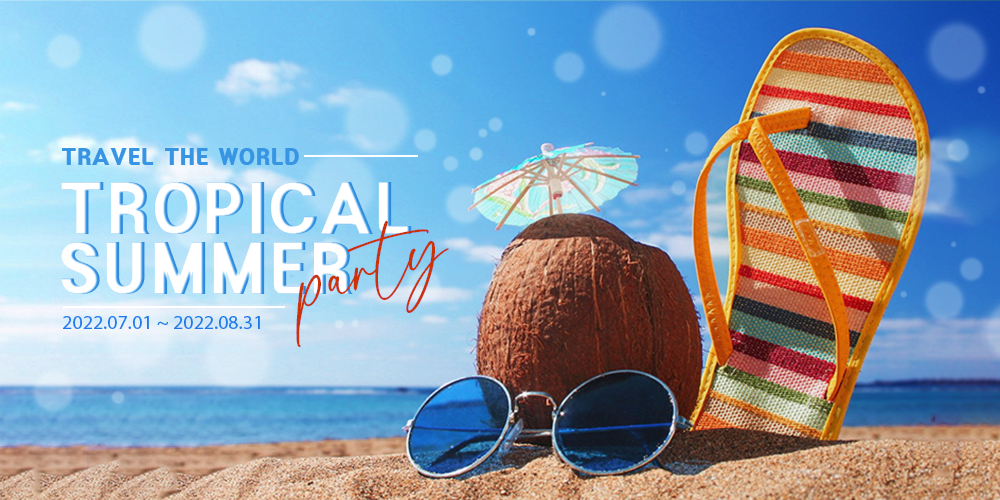
<style>
.page{position:relative;width:1000px;height:500px}
.page>*{position:absolute;margin:0}
.t1{font:20px "HeadlineR-HM";color:#3895e3}
.t2{font:60.1px/60.1px "HeadlineR-HM";color:#ffffff}
.t3{font:90px "Hamilton";color:#ca3305}
.t4{font:20px "MyriadPro-Regular";color:#1e7aeb}
</style>
<div class="page">
<p class="t1" style="left:62px;top:148px;width:237px;height:17px">TRAVEL THE WORLD</p>
<p class="t2" style="left:61px;top:182px;width:351px;height:112px">TROPICAL<br>SUMMER</p>
<p class="t3" style="left:296px;top:220px;width:153px;height:127px;rotate:-16deg">party</p>
<p class="t4" style="left:63px;top:316px;width:197px;height:13px">2022.07.01 ~ 2022.08.31</p>
</div>
